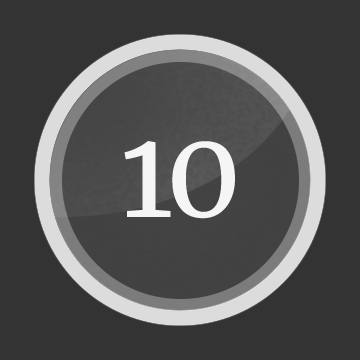
<style>
.page{position:relative;width:360px;height:360px;background:#333333}
.page>*{position:absolute;margin:0}
.t1{font:120px "Merriweather-Regular";letter-spacing:-0.06em;color:#f5f5f5}
</style>
<div class="page">
<p class="t1" style="left:124px;top:141px;width:111px;height:78px">10</p>
</div>
